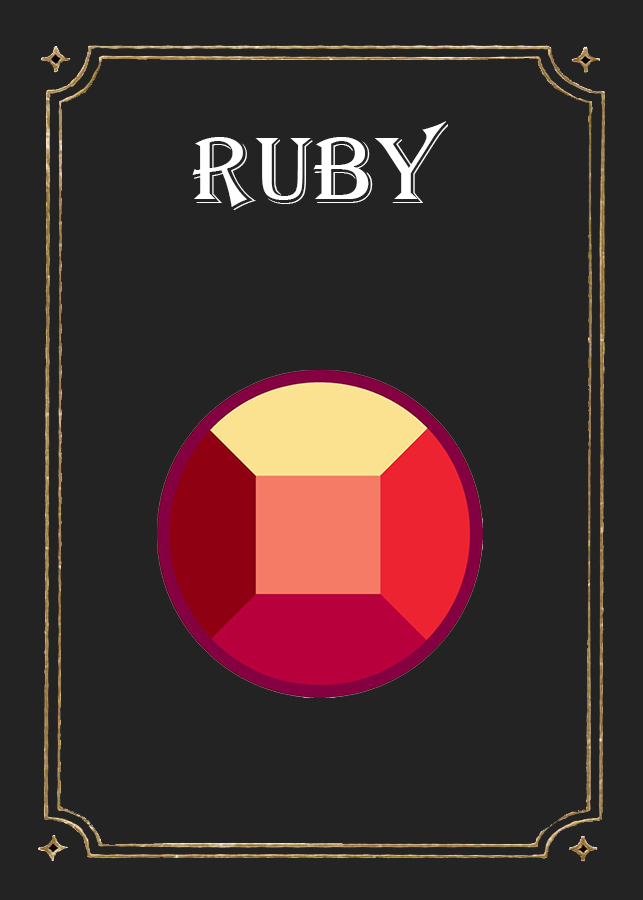
<style>
.page{position:relative;width:643px;height:900px;background:#232323}
.page>*{position:absolute;margin:0}
.t1{font:98.3px "Algerian";color:#ffffff}
</style>
<div class="page">
<p class="t1" style="left:192px;top:121px;width:256px;height:89px">Ruby</p>
</div>
